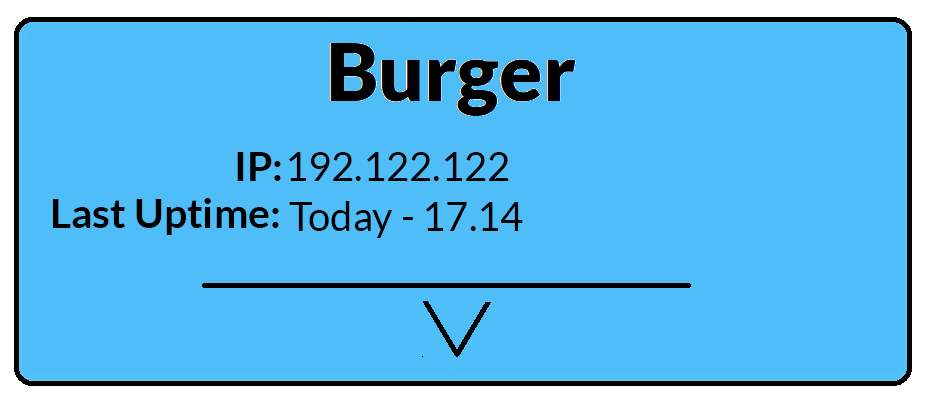
<style>
.page{position:relative;width:937px;height:393px;background:#4fbef8}
.page>*{position:absolute;margin:0}
.t1{font:40.9px "Lato-Bold";color:#000000}
.t2{font:40px "Lato-Regular";color:#000000}
</style>
<div class="page">
<p class="t1" style="left:237px;top:152px;width:44px;height:29px">IP:</p>
<p class="t2" style="left:289px;top:152px;width:220px;height:29px">192.122.122</p>
<p class="t1" style="left:53px;top:198px;width:226px;height:37px">Last Uptime:</p>
<p class="t2" style="left:289px;top:201px;width:234px;height:37px">Today - 17.14</p>
</div>
